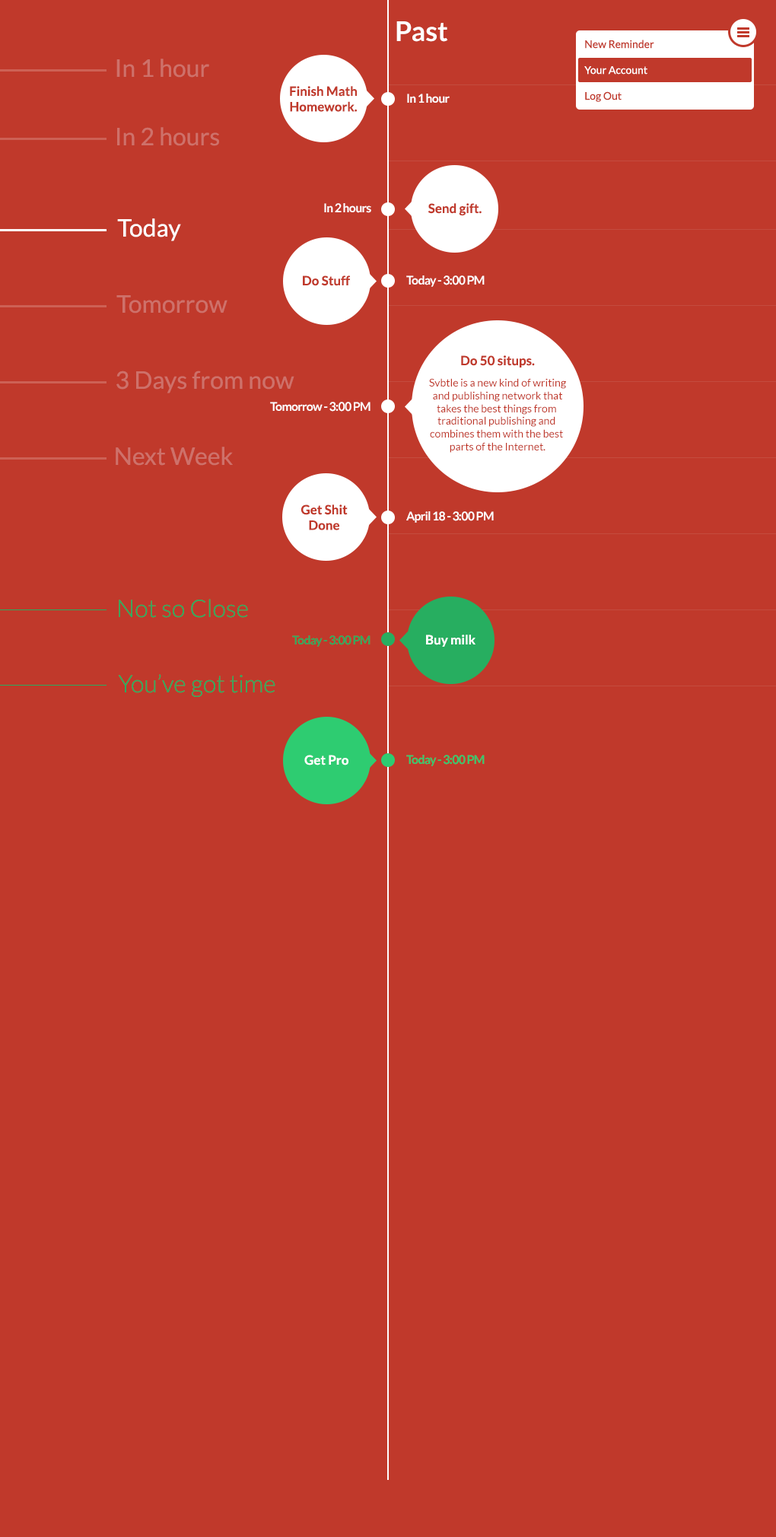
<style>
.page{position:relative;width:776px;height:1537px;background:#c0392b}
.page>*{position:absolute;margin:0}
.t1{font:27.4px "Lato-Bold";color:#ffffff}
.t2{font:10.7px "Lato-Regular";color:#c0392b}
.t3{font:24.3px "Lato-Regular";color:#ce716a}
.t4{font:10.7px "Lato-Regular";color:#ffffff}
.t5{font:12.9px "Lato-Bold";color:#c0392b}
.t6{font:12.2px "Lato-Bold";letter-spacing:-0.05em;color:#ffffff}
.t7{font:24.3px "Lato-Regular";color:#ffffff}
.t8{font:24.3px "Lato-Light";color:#27ae60}
.t9{font:12.2px "Lato-Bold";letter-spacing:-0.05em;color:#27ae60}
.t10{font:12.9px "Lato-Bold";color:#ffffff}
.t11{font:12.2px "Lato-Bold";letter-spacing:-0.05em;color:#2ecc71}
</style>
<div class="page">
<p class="t1" style="left:396px;top:21px;width:52px;height:21px">Past</p>
<p class="t2" style="left:585px;top:40px;width:69px;height:9px">New Reminder</p>
<p class="t3" style="left:116px;top:59px;width:93px;height:19px">In 1 hour</p>
<p class="t4" style="left:584px;top:66px;width:63px;height:9px">Your Account</p>
<p class="t5" style="left:290px;top:86px;width:67px;height:26px;text-align:center">Finish Math<br>Homework.</p>
<p class="t6" style="left:407px;top:94px;width:43px;height:9px">In 1 hour</p>
<p class="t2" style="left:585px;top:91px;width:37px;height:11px">Log Out</p>
<p class="t3" style="left:117px;top:127px;width:102px;height:19px">In 2 hours</p>
<p class="t6" style="left:324px;top:203px;width:47px;height:10px">In 2 hours</p>
<p class="t5" style="left:428px;top:203px;width:54px;height:13px">Send gift.</p>
<p class="t7" style="left:117px;top:218px;width:64px;height:23px">Today</p>
<p class="t5" style="left:303px;top:275px;width:47px;height:11px">Do Stuff</p>
<p class="t6" style="left:406px;top:275px;width:79px;height:12px">Today - 3:00 PM</p>
<p class="t3" style="left:116px;top:295px;width:111px;height:18px">Tomorrow</p>
<p class="t5" style="left:461px;top:355px;width:74px;height:12px">Do 50 situps.</p>
<p class="t3" style="left:116px;top:370px;width:178px;height:23px">3 Days from now</p>
<p class="t2" style="left:429px;top:378px;width:137px;height:75px;text-align:center">Svbtle is a new kind of writing<br>and publishing network that<br>takes the best things from <br>traditional publishing and <br>combines them with the best <br>parts of the Internet.</p>
<p class="t6" style="left:270px;top:402px;width:100px;height:10px">Tomorrow - 3:00 PM</p>
<p class="t3" style="left:116px;top:447px;width:117px;height:19px">Next Week</p>
<p class="t5" style="left:300px;top:504px;width:48px;height:26px;text-align:center">Get Shit<br>Done</p>
<p class="t6" style="left:406px;top:511px;width:88px;height:12px">April 18 - 3:00 PM</p>
<p class="t8" style="left:119px;top:599px;width:129px;height:19px">Not so Close</p>
<p class="t9" style="left:292px;top:635px;width:78px;height:12px">Today - 3:00 PM</p>
<p class="t10" style="left:426px;top:634px;width:49px;height:13px">Buy milk</p>
<p class="t8" style="left:118px;top:674px;width:157px;height:23px">You’ve got time</p>
<p class="t10" style="left:304px;top:755px;width:44px;height:10px">Get Pro</p>
<p class="t11" style="left:406px;top:755px;width:79px;height:11px">Today - 3:00 PM</p>
</div>
